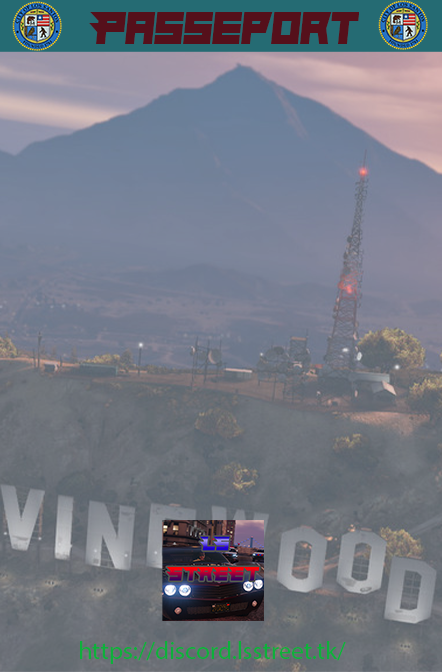
<style>
.page{position:relative;width:442px;height:672px}
.page>*{position:absolute;margin:0}
.t1{font:45.8px "Hindsight2020";color:#55101b}
.t2{font:25px "MyriadPro-Regular";color:#0db03b}
</style>
<div class="page">
<p class="t1" style="left:89px;top:12px;width:270px;height:32px">Passeport</p>
<p class="t2" style="left:80px;top:641px;width:266px;height:23px">https://discord.lsstreet.tk/</p>
</div>
